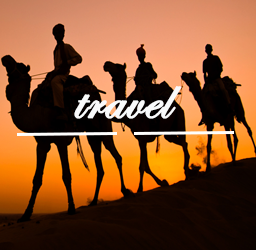
<style>
.page{position:relative;width:256px;height:250px}
.page>*{position:absolute;margin:0}
.t1{font:60px "EdwardianScriptITC";color:#f9fafb;font-weight:bold}
</style>
<div class="page">
<p class="t1" style="left:74px;top:86px;width:108px;height:33px">travel</p>
</div>
